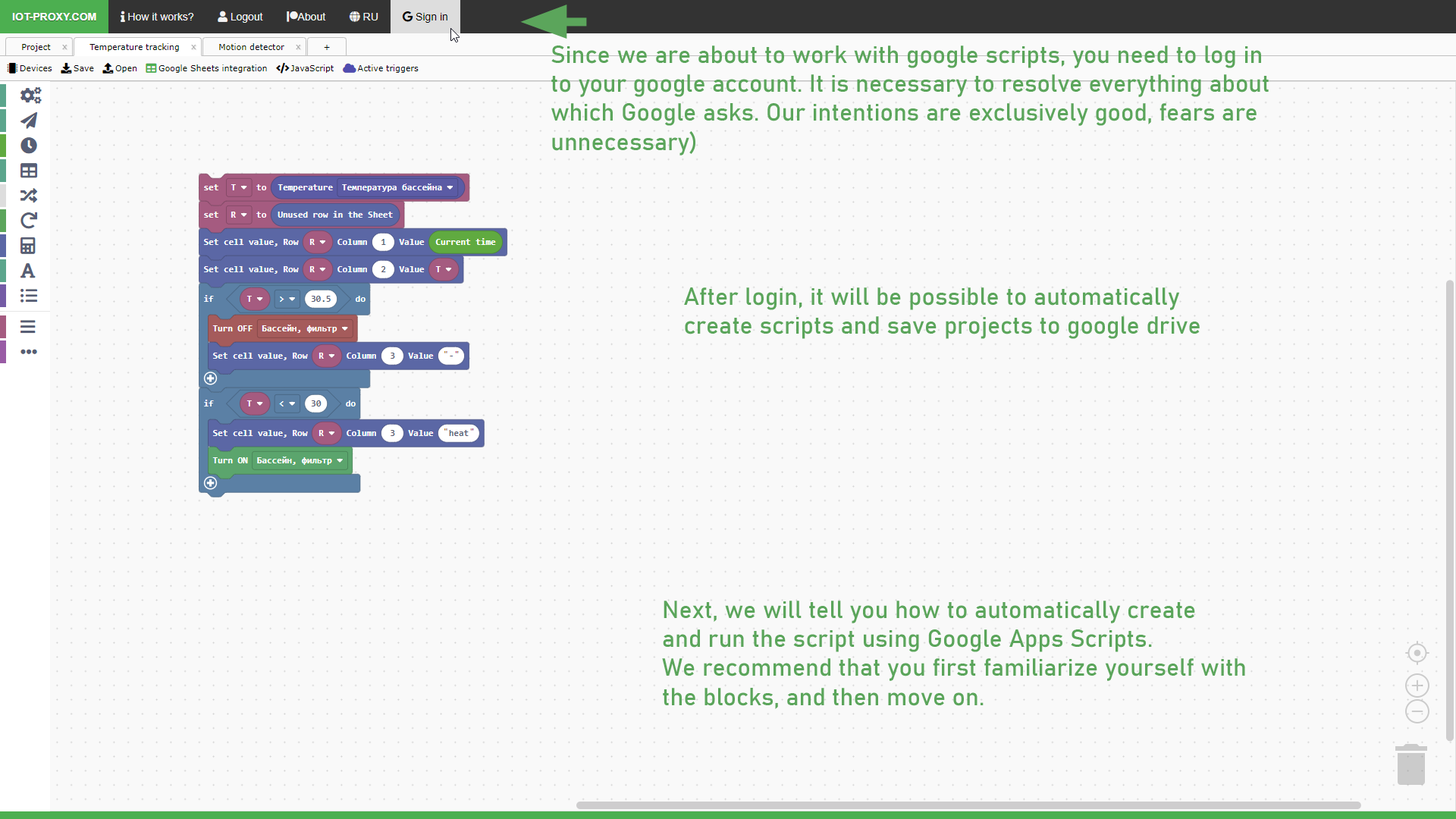
<style>
.page{position:relative;width:1456px;height:819px;background:#f9f9f9}
.page>*{position:absolute;margin:0}
.t1{font:24.3px "Bahnschrift";color:#5ba55b}
</style>
<div class="page">
<p class="t1" style="left:551px;top:45px;width:718px;height:110px">Since we are about to work with google scripts, you need to log in<br>to your google account. It is necessary to resolve everything about <br>which Google asks. Our intentions are exclusively good, fears are <br>unnecessary)</p>
<p class="t1" style="left:684px;top:287px;width:516px;height:52px">After login, it will be possible to automatically<br>create scripts and save projects to google drive</p>
<p class="t1" style="left:662px;top:601px;width:583px;height:108px">Next, we will tell you how to automatically create<br>and run the script using Google Apps Scripts.<br>We recommend that you first familiarize yourself with <br>the blocks, and then move on.</p>
</div>
